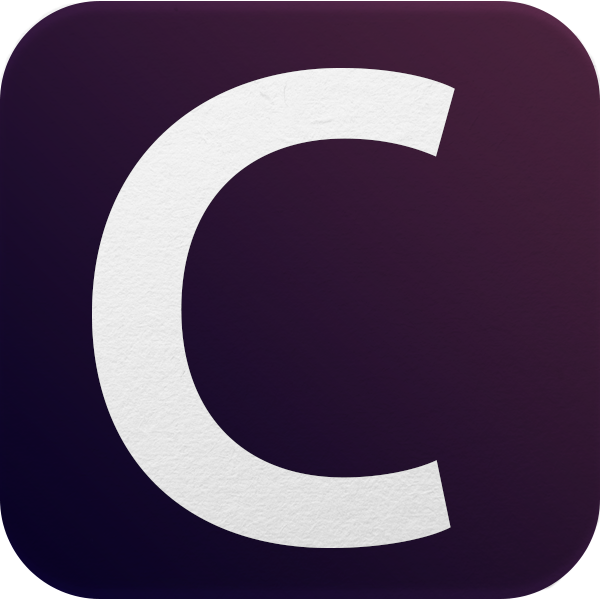
<style>
.page{position:relative;width:600px;height:600px}
.page>*{position:absolute;margin:0}
.t1{font:690.9px "MyriadPro-Semibold";color:#ffffff}
</style>
<div class="page">
<p class="t1" style="left:92px;top:68px;width:363px;height:480px">C</p>
</div>
